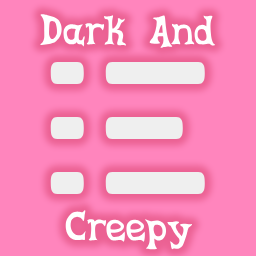
<style>
.page{position:relative;width:256px;height:256px;background:#ff85bd}
.page>*{position:absolute;margin:0}
.t1{font:45.2px "CelestiaReduxAltMedium";color:#ffffff}
</style>
<div class="page">
<p class="t1" style="left:40px;top:14px;width:176px;height:34px">Dark And</p>
<p class="t1" style="left:65px;top:210px;width:127px;height:40px">Creepy</p>
</div>
